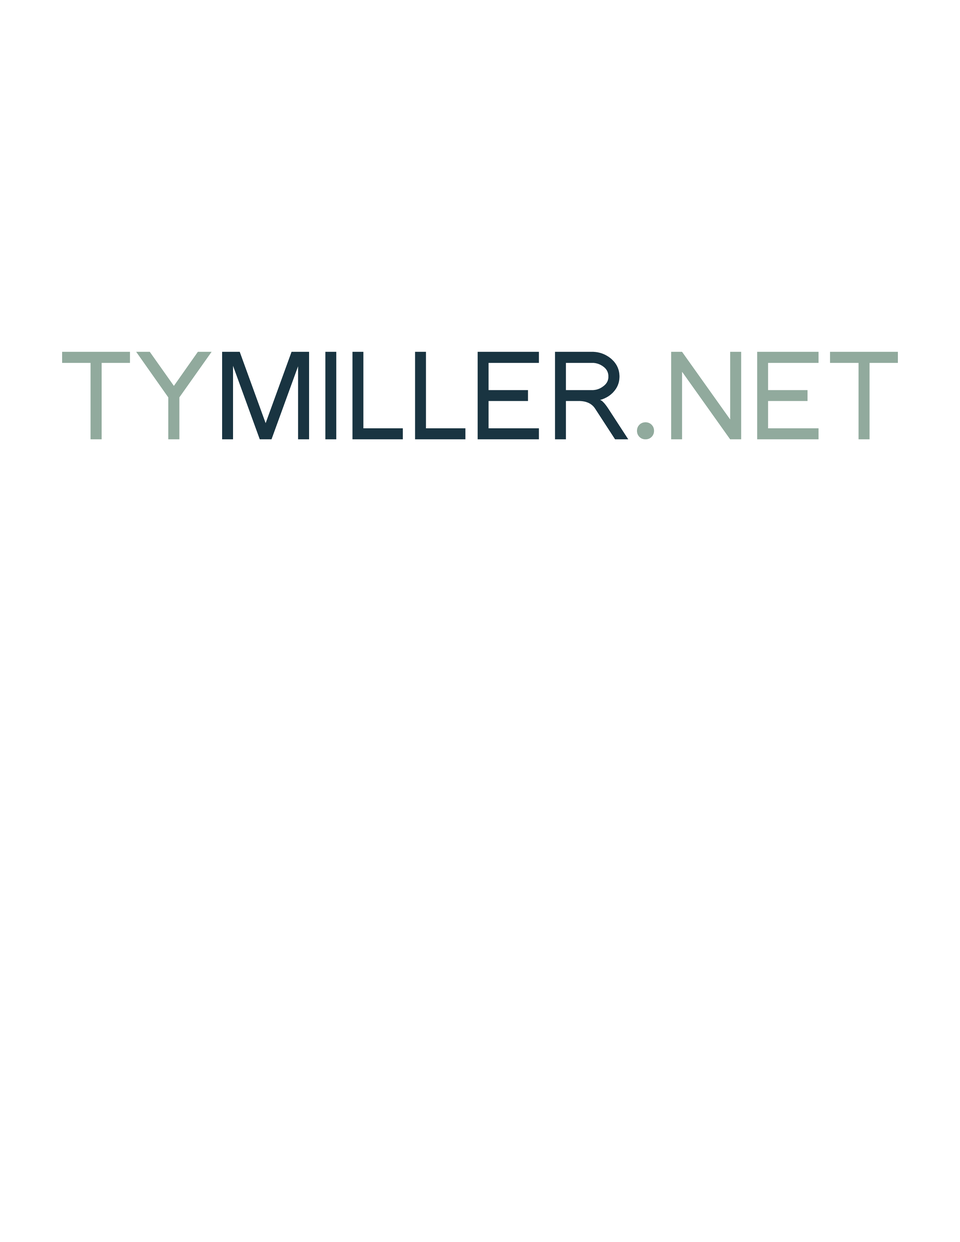
<style>
.page{position:relative;width:960px;height:1242px;background:#ffffff}
.page>*{position:absolute;margin:0}
.t1{font:138.8px "FlorencesansSC";color:#193441}
.t2{font:138.8px "FlorencesansSC";color:#91aa9d}
</style>
<div class="page">
<p class="t1" style="left:62px;top:352px;width:836px;height:88px"><span class="t2">ty</span>miller<span class="t2">.net</span></p>
</div>
